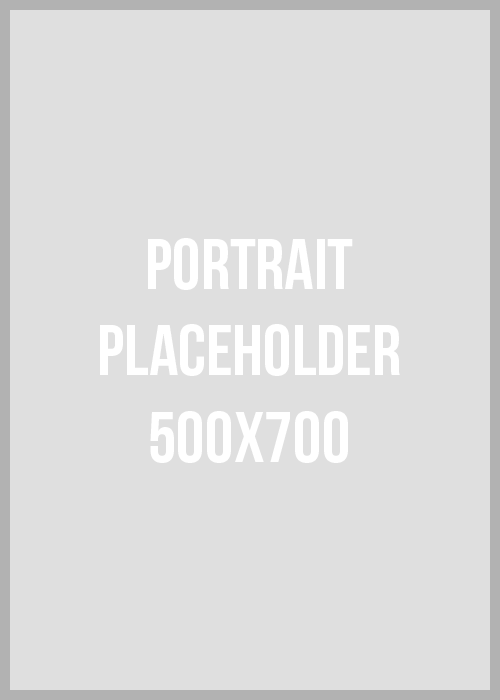
<style>
.page{position:relative;width:500px;height:700px;background:#dfdfdf}
.page>*{position:absolute;margin:0}
.t1{font:72px "BebasNeue";color:#ffffff}
</style>
<div class="page">
<p class="t1" style="left:100px;top:238px;width:300px;height:225px;text-align:center">Portrait<br>Placeholder<br>500x700</p>
</div>
